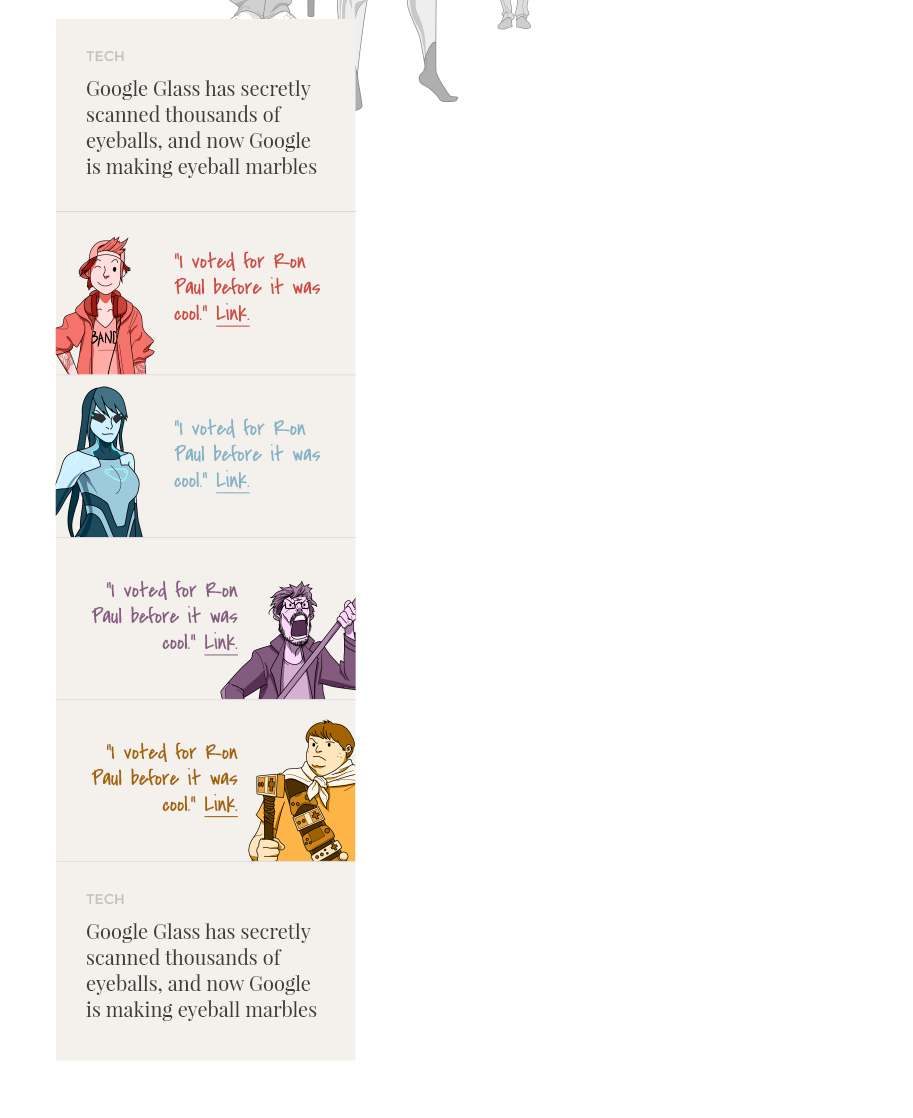
<style>
.page{position:relative;width:913px;height:1118px;background:#ffffff}
.page>*{position:absolute;margin:0}
.t1{font:14px "Montserrat-Regular";color:#c5c1be}
.t2{font:20px/26px "PlayfairDisplay-Regular";color:#3f3d3b}
.t3{font:21.9px/26px "CoveredByYourGrace";color:#ce4b43}
.t4{font:21.9px/26px "CoveredByYourGrace";color:#ce4b43;text-decoration:underline}
.t5{font:21.9px/26px "CoveredByYourGrace";color:#85b3c6}
.t6{font:21.9px/26px "CoveredByYourGrace";color:#85b3c6;text-decoration:underline}
.t7{font:21.9px/26px "CoveredByYourGrace";color:#865e81}
.t8{font:21.9px/26px "CoveredByYourGrace";color:#865e81;text-decoration:underline}
.t9{font:21.9px/26px "CoveredByYourGrace";color:#a26300}
.t10{font:21.9px/26px "CoveredByYourGrace";color:#a26300;text-decoration:underline}
</style>
<div class="page">
<p class="t1" style="left:86px;top:50px;width:38px;height:12px">TECH</p>
<p class="t2" style="left:86px;top:80px;width:231px;height:98px">Google Glass has secretly scanned thousands of eyeballs, and now Google is making eyeball marbles</p>
<p class="t3" style="left:174px;top:251px;width:147px;height:76px">“I voted for Ron Paul before it was cool.” <span class="t4">Link.</span></p>
<p class="t5" style="left:174px;top:418px;width:147px;height:76px">“I voted for Ron Paul before it was cool.” <span class="t6">Link.</span></p>
<p class="t7" style="left:91px;top:580px;width:147px;height:76px;text-align:right">“I voted for Ron Paul before it was cool.” <span class="t8">Link.</span></p>
<p class="t9" style="left:91px;top:742px;width:147px;height:76px;text-align:right">“I voted for Ron Paul before it was cool.” <span class="t10">Link.</span></p>
<p class="t1" style="left:86px;top:893px;width:38px;height:12px">TECH</p>
<p class="t2" style="left:86px;top:923px;width:231px;height:98px">Google Glass has secretly scanned thousands of eyeballs, and now Google is making eyeball marbles</p>
</div>
